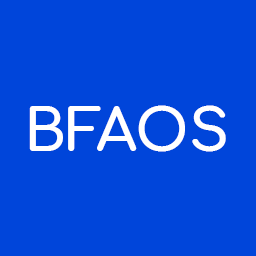
<style>
.page{position:relative;width:256px;height:256px;background:#0045da}
.page>*{position:absolute;margin:0}
.t1{font:58.3px "Comfortaa-Bold";color:#ffffff}
</style>
<div class="page">
<p class="t1" style="left:29px;top:105px;width:197px;height:47px">BFAOS</p>
</div>
